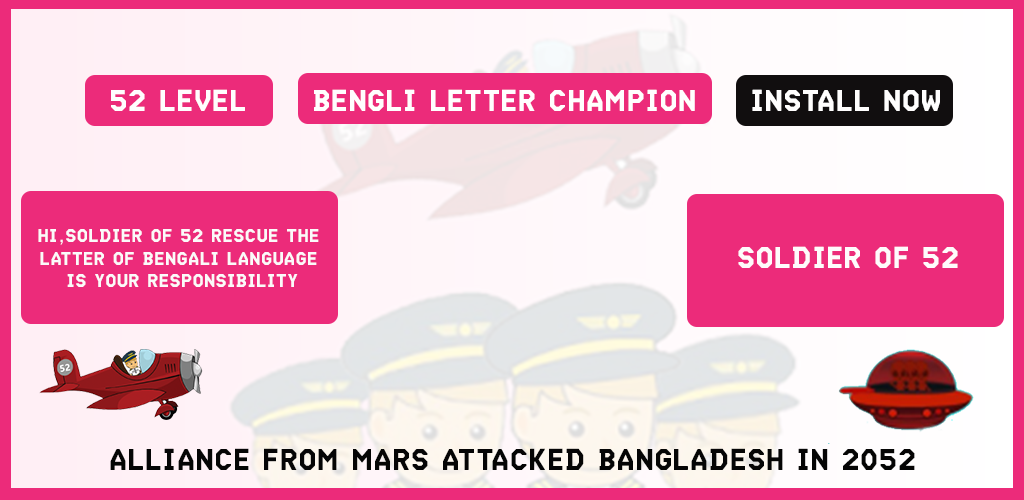
<style>
.page{position:relative;width:1024px;height:500px;background:#ec2b7a}
.page>*{position:absolute;margin:0}
.t1{font:30px "'-Mono-Bold";color:#fffefe}
.t2{font:18.6px "'-Mono-Bold";color:#fbfafa}
.t3{font:30px "'-Mono-Bold";color:#fefbfc}
.t4{font:30px "'-Mono-Bold";color:#050505}
</style>
<div class="page">
<p class="t1" style="left:111px;top:89px;width:134px;height:22px">52 LEVEL</p>
<p class="t1" style="left:314px;top:89px;width:381px;height:22px">BENGLI LETTER CHAMPION</p>
<p class="t1" style="left:752px;top:89px;width:188px;height:22px">INSTALL NOW</p>
<p class="t2" style="left:38px;top:229px;width:281px;height:58px;text-align:center">HI,SOLDIER OF 52 RESCUE THE <br>LATTER OF BENGALI LANGUAGE <br>IS YOUR RESPONSIBILITY</p>
<p class="t3" style="left:738px;top:246px;width:220px;height:22px">SOLDIER OF 52</p>
<p class="t4" style="left:110px;top:448px;width:805px;height:22px">ALLIANCE FROM MARS ATTACKED BANGLADESH IN 2052</p>
</div>
